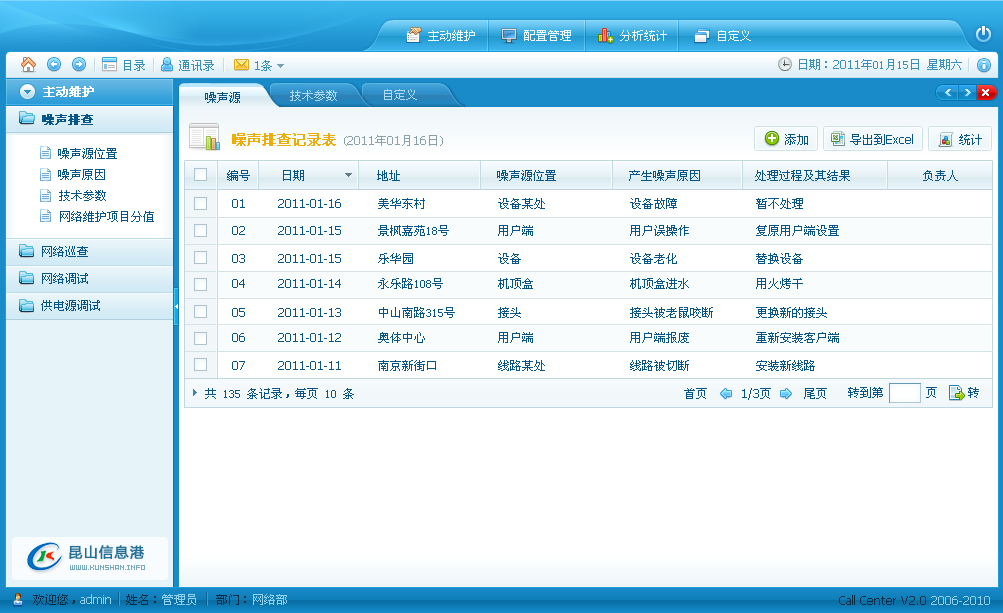
<style>
.page{position:relative;width:1003px;height:613px;background:#ffffff}
.page>*{position:absolute;margin:0}
.t1{font:12px "SimSun";color:#effaff}
.t2{font:12px "SimSun";color:#3b90b7}
.t3{font:12px "Tahoma";color:#3b90b7}
.t4{font:12px "SimSun";color:#ffffff;font-weight:bold}
.t5{font:12px "SimSun";color:#afdbfa}
.t6{font:12px "SimSun";color:#075587}
.t7{font:12px "SimSun";color:#075587;font-weight:bold}
.t8{font:14px "SimSun";color:#ebad06;font-weight:bold}
.t9{font:12px "Tahoma";color:#8ba1aa}
.t10{font:12px "SimSun";color:#8ba1aa}
.t11{font:12px "Tahoma";color:#075587}
.t12{font:14px "MicrosoftYaHei";letter-spacing:0.075em;color:#227099;font-weight:bold}
.t13{font:8px "SG08";color:#7babc0}
.t14{font:12px "SimSun";color:#022c43}
.t15{font:12px "Tahoma";color:#93d2ef}
.t16{font:12px "SimSun";color:#93d2ef}
.t17{font:12px "Tahoma";color:#022c43}
</style>
<div class="page">
<p class="t1" style="left:428px;top:30px;width:323px;height:11px">主动维护        配置管理        分析统计        自定义</p>
<p class="t2" style="left:124px;top:60px;width:21px;height:11px">目录</p>
<p class="t2" style="left:179px;top:60px;width:35px;height:11px">通讯录</p>
<p class="t3" style="left:255px;top:60px;width:17px;height:11px">1<span class="t2">条</span></p>
<p class="t2" style="left:799px;top:59px;width:163px;height:11px">日期：<span class="t3">2011</span>年01月15日 星期六</p>
<p class="t4" style="left:43px;top:86px;width:51px;height:11px">主动维护</p>
<p class="t5" style="left:384px;top:89px;width:33px;height:11px">自定义</p>
<p class="t6" style="left:205px;top:92px;width:35px;height:11px">噪声源</p>
<p class="t5" style="left:290px;top:90px;width:47px;height:11px">技术参数</p>
<p class="t7" style="left:42px;top:114px;width:51px;height:11px">噪声排查</p>
<p class="t8" style="left:232px;top:133px;width:104px;height:13px">噪声排查记录表</p>
<p class="t9" style="left:344px;top:135px;width:99px;height:11px"><span class="t10">(</span>2011<span class="t10">年</span>01<span class="t10">月</span>16<span class="t10">日)</span></p>
<p class="t6" style="left:785px;top:134px;width:23px;height:11px">添加</p>
<p class="t11" style="left:850px;top:134px;width:63px;height:11px"><span class="t6">导出到</span>Excel</p>
<p class="t6" style="left:959px;top:134px;width:23px;height:11px">统计</p>
<p class="t6" style="left:58px;top:148px;width:59px;height:11px">噪声源位置</p>
<p class="t6" style="left:58px;top:169px;width:47px;height:11px">噪声原因</p>
<p class="t6" style="left:227px;top:170px;width:731px;height:11px">编号     日期            地址                噪声源位置            产生噪声原因         处理过程及其结果            负责人</p>
<p class="t6" style="left:59px;top:190px;width:47px;height:11px">技术参数</p>
<p class="t6" style="left:232px;top:198px;width:571px;height:11px"><span class="t11">01        2011-01-16         </span>美华东村            设备某处              设备故障             暂不处理</p>
<p class="t6" style="left:60px;top:211px;width:94px;height:11px">网络维护项目分值</p>
<p class="t6" style="left:232px;top:225px;width:607px;height:11px"><span class="t11">02        2011-01-15         </span>景枫嘉苑18号        用户端                用户误操作           复原用户端设置</p>
<p class="t6" style="left:42px;top:246px;width:46px;height:11px">网络巡查</p>
<p class="t6" style="left:232px;top:253px;width:571px;height:11px"><span class="t11">03        2011-01-15         </span>乐华园              设备                  设备老化             替换设备</p>
<p class="t6" style="left:42px;top:273px;width:46px;height:11px">网络调试</p>
<p class="t6" style="left:232px;top:278px;width:571px;height:11px"><span class="t11">04        2011-01-14         </span>永乐路108号         机顶盒                机顶盒进水           用火烤干</p>
<p class="t6" style="left:41px;top:300px;width:59px;height:11px">供电源调试</p>
<p class="t6" style="left:232px;top:307px;width:595px;height:11px"><span class="t11">05        2011-01-13         </span>中山南路315号       接头                  接头被老鼠咬断       更换新的接头</p>
<p class="t6" style="left:232px;top:332px;width:607px;height:11px"><span class="t11">06        2011-01-12         </span>奥体中心            用户端                用户端报废           重新安装客户端</p>
<p class="t6" style="left:232px;top:360px;width:583px;height:11px"><span class="t11">07        2011-01-11         </span>南京新街口          线路某处              线路被切断           安装新线路</p>
<p class="t6" style="left:205px;top:388px;width:149px;height:11px">共 135 条记录，每页 10 条</p>
<p class="t6" style="left:684px;top:388px;width:143px;height:11px">首页                尾页</p>
<p class="t11" style="left:742px;top:388px;width:29px;height:12px">1/3<span class="t6">页</span></p>
<p class="t6" style="left:848px;top:387px;width:131px;height:11px">转到第       页     转</p>
<p class="t12" style="left:69px;top:545px;width:75px;height:14px">昆山信息港</p>
<p class="t13" style="left:70px;top:565px;width:75px;height:5px">WWW.KUNSHAN.INFO</p>
<p class="t14" style="left:33px;top:594px;width:42px;height:11px">欢迎您，</p>
<p class="t15" style="left:80px;top:594px;width:31px;height:10px">admin</p>
<p class="t14" style="left:126px;top:594px;width:161px;height:11px">姓名：<span class="t16">管理员   </span>部门：<span class="t16">网络部</span></p>
<p class="t17" style="left:839px;top:595px;width:151px;height:10px">Call Center V2.0 <span class="t15">2006-2010</span></p>
</div>
